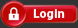
<style>
.page{position:relative;width:78px;height:28px;background:#333333}
.page>*{position:absolute;margin:0}
.t1{font:12.6px "MyriadPro-Bold";color:#ffffff}
</style>
<div class="page">
<p class="t1" style="left:33px;top:9px;width:32px;height:11px">Login</p>
</div>
